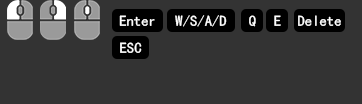
<style>
.page{position:relative;width:362px;height:104px;background:#333333}
.page>*{position:absolute;margin:0}
.t1{font:14.7px "SimHei";color:#ffffff}
</style>
<div class="page">
<p class="t1" style="left:119px;top:15px;width:36px;height:11px">Enter</p>
<p class="t1" style="left:175px;top:15px;width:52px;height:12px">W/S/A/D</p>
<p class="t1" style="left:249px;top:15px;width:7px;height:12px">Q</p>
<p class="t1" style="left:274px;top:15px;width:7px;height:11px">E</p>
<p class="t1" style="left:298px;top:15px;width:43px;height:11px">Delete</p>
<p class="t1" style="left:120px;top:42px;width:22px;height:11px">ESC</p>
</div>
